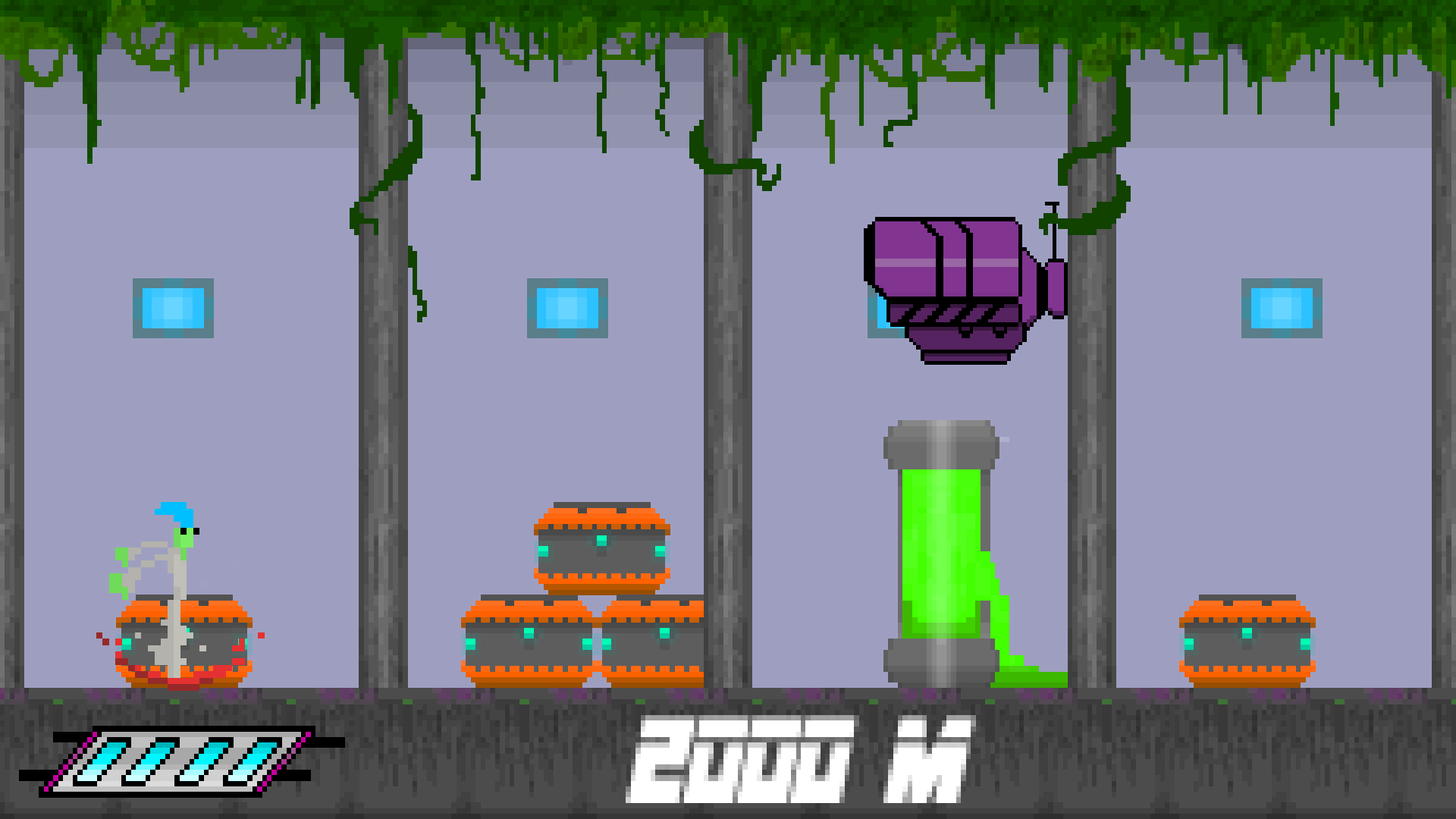
<style>
.page{position:relative;width:1456px;height:819px;background:#9e9fc0}
.page>*{position:absolute;margin:0}
.t1{font:91px "MetalGear";color:#ffffff;scale:0.89 1}
</style>
<div class="page">
<p class="t1" style="left:626px;top:715px;width:350px;height:88px">2ooo m</p>
</div>
